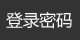
<style>
.page{position:relative;width:80px;height:40px;background:#333333}
.page>*{position:absolute;margin:0}
.t1{font:16.7px "MicrosoftYaHei";color:#ffffff}
</style>
<div class="page">
<p class="t1" style="left:6px;top:12px;width:66px;height:17px">登录密码</p>
</div>
